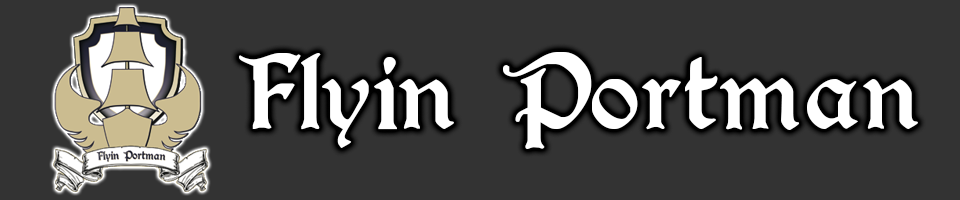
<style>
.page{position:relative;width:960px;height:200px;background:#333333}
.page>*{position:absolute;margin:0}
.t1{font:118.1px "Augusta-Regular";color:#ffffff}
</style>
<div class="page">
<p class="t1" style="left:239px;top:52px;width:679px;height:97px">Flyin Portman</p>
</div>
